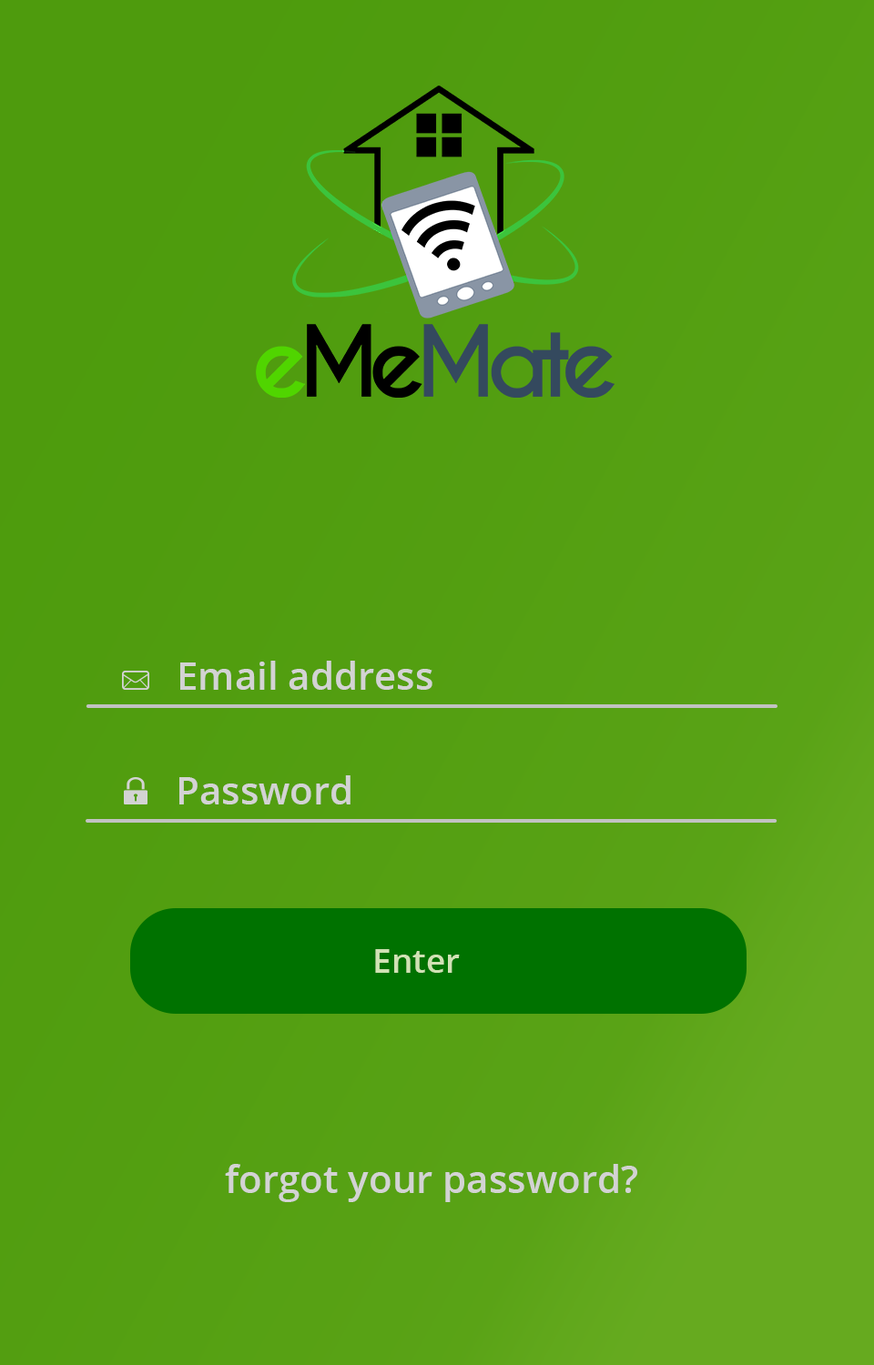
<style>
.page{position:relative;width:874px;height:1365px}
.page>*{position:absolute;margin:0}
.t1{font:38.2px "OpenSans-Semibold";color:#d3d3d3}
.t2{font:33.7px "OpenSans-Semibold";color:#d0e2b4}
</style>
<div class="page">
<p class="t1" style="left:180px;top:661px;width:252px;height:29px">Email address</p>
<p class="t1" style="left:179px;top:775px;width:171px;height:29px">Password</p>
<p class="t2" style="left:375px;top:949px;width:85px;height:24px">Enter</p>
<p class="t1" style="left:225px;top:1164px;width:412px;height:38px">forgot your password?</p>
</div>
